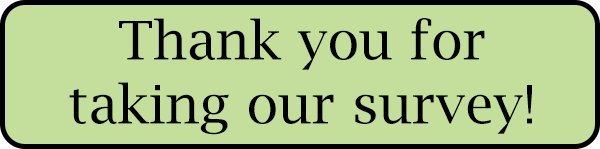
<style>
.page{position:relative;width:600px;height:149px;background:#c4df9b}
.page>*{position:absolute;margin:0}
.t1{font:53.3px "LucidaBright";color:#000000}
</style>
<div class="page">
<p class="t1" style="left:69px;top:18px;width:463px;height:117px;text-align:center">Thank you for <br>taking our survey!</p>
</div>
